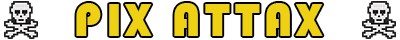
<style>
.page{position:relative;width:400px;height:40px;background:#ffffff}
.page>*{position:absolute;margin:0}
.t1{font:48px "Bauhaus93";letter-spacing:0.1em;color:#eed113}
</style>
<div class="page">
<p class="t1" style="left:76px;top:3px;width:247px;height:33px">PIX ATTAX</p>
</div>
